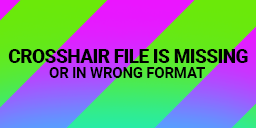
<style>
.page{position:relative;width:256px;height:128px}
.page>*{position:absolute;margin:0}
.t1{font:18.8px "Roboto-Black";letter-spacing:-0.025em;color:#000000}
.t2{font:15.3px "Roboto-Bold";letter-spacing:-0.025em;color:#000000}
</style>
<div class="page">
<p class="t1" style="left:8px;top:49px;width:240px;height:14px">CROSSHAIR FILE IS MISSING</p>
<p class="t2" style="left:49px;top:67px;width:156px;height:11px">OR IN WRONG FORMAT</p>
</div>
